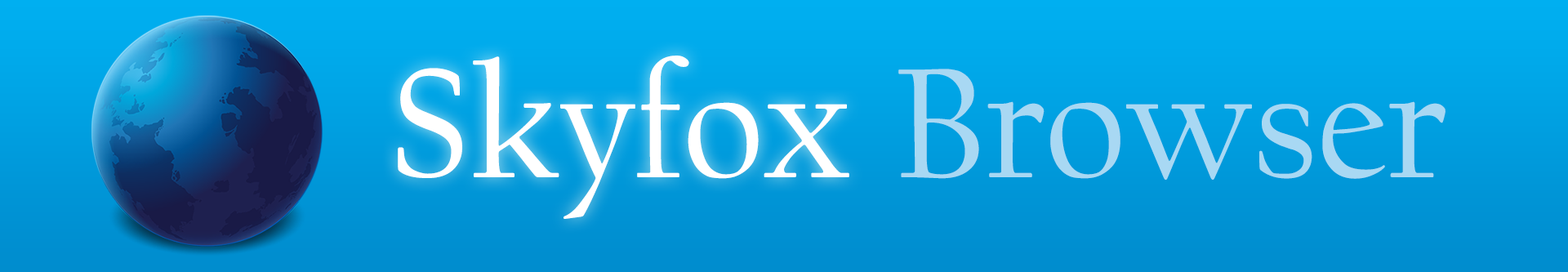
<style>
.page{position:relative;width:1568px;height:272px}
.page>*{position:absolute;margin:0}
.t1{font:163.4px "CalifornianFB-Reg";color:#ffffff}
.t2{font:163.4px "CalifornianFB-Reg";color:#a8d8f3}
</style>
<div class="page">
<p class="t1" style="left:398px;top:56px;width:451px;height:163px">Skyfox</p>
<p class="t2" style="left:898px;top:69px;width:548px;height:111px">Browser</p>
</div>
